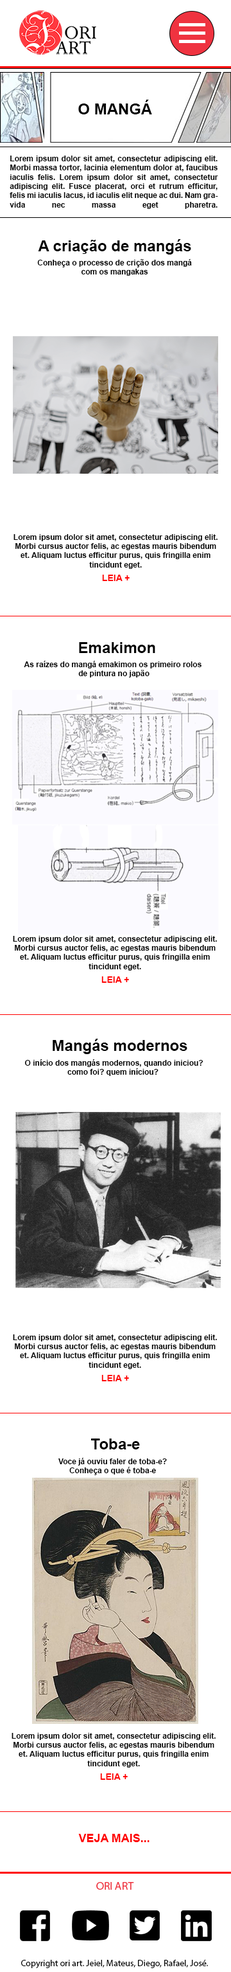
<style>
.page{position:relative;width:231px;height:1972px;background:#ffffff}
.page>*{position:absolute;margin:0}
.t1{font:15.4px "Arial-BoldMT";color:#000000}
.t2{font:7.7px "Arial-BoldMT";color:#000000}
.t3{font:9px "Arial-BoldMT";color:#ff0000}
.t4{font:11.6px "Arial-BoldMT";color:#fe0000}
</style>
<div class="page">
<p class="t1" style="left:78px;top:100px;width:74px;height:14px">O MANGÁ</p>
<p class="t2" style="left:10px;top:156px;width:209px;height:53px;text-align:justify">Lorem ipsum dolor sit amet, consectetur adipiscing elit. Morbi massa tortor, lacinia elementum dolor at, faucibus iaculis felis. Lorem ipsum dolor sit amet, consectetur adipiscing elit. Fusce placerat, orci et rutrum efficitur, felis mi iaculis lacus, id iaculis elit neque ac dui. Nam gravida nec massa eget pharetra.</p>
<p class="t1" style="left:38px;top:239px;width:154px;height:16px">A criação de mangás</p>
<p class="t2" style="left:37px;top:259px;width:155px;height:17px;text-align:center">Conheça o processo de crição dos mangá<br>com os mangakas</p>
<p class="t2" style="left:14px;top:534px;width:204px;height:35px;text-align:center">Lorem ipsum dolor sit amet, consectetur adipiscing elit. Morbi cursus auctor felis, ac egestas mauris bibendum et. Aliquam luctus efficitur purus, quis fringilla enim tincidunt eget.</p>
<p class="t3" style="left:102px;top:575px;width:28px;height:6px">LEIA +</p>
<p class="t1" style="left:79px;top:642px;width:77px;height:11px">Emakimon</p>
<p class="t2" style="left:24px;top:661px;width:178px;height:17px;text-align:center">As raízes do mangá emakimon os primeiro rolos <br>de pintura no japão</p>
<p class="t2" style="left:13px;top:936px;width:204px;height:35px;text-align:center">Lorem ipsum dolor sit amet, consectetur adipiscing elit. Morbi cursus auctor felis, ac egestas mauris bibendum et. Aliquam luctus efficitur purus, quis fringilla enim tincidunt eget.</p>
<p class="t3" style="left:102px;top:977px;width:27px;height:6px">LEIA +</p>
<p class="t1" style="left:53px;top:1039px;width:135px;height:15px">Mangás modernos</p>
<p class="t2" style="left:24px;top:1059px;width:180px;height:17px;text-align:center">O início dos mangás modernos, quando iniciou?<br>como foi? quem iníciou?</p>
<p class="t2" style="left:13px;top:1335px;width:204px;height:34px;text-align:center">Lorem ipsum dolor sit amet, consectetur adipiscing elit. Morbi cursus auctor felis, ac egestas mauris bibendum et. Aliquam luctus efficitur purus, quis fringilla enim tincidunt eget.</p>
<p class="t3" style="left:102px;top:1375px;width:27px;height:7px">LEIA +</p>
<p class="t1" style="left:91px;top:1439px;width:49px;height:11px">Toba-e</p>
<p class="t2" style="left:59px;top:1458px;width:108px;height:17px;text-align:center">Voce já ouviu faler de toba-e?<br>Conheça o que é toba-e</p>
<p class="t2" style="left:12px;top:1733px;width:204px;height:35px;text-align:center">Lorem ipsum dolor sit amet, consectetur adipiscing elit. Morbi cursus auctor felis, ac egestas mauris bibendum et. Aliquam luctus efficitur purus, quis fringilla enim tincidunt eget.</p>
<p class="t3" style="left:100px;top:1774px;width:28px;height:6px">LEIA +</p>
<p class="t4" style="left:78px;top:1834px;width:72px;height:8px">VEJA MAIS...</p>
</div>
